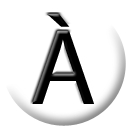
<style>
.page{position:relative;width:128px;height:128px;background:#ffffff}
.page>*{position:absolute;margin:0}
.t1{font:109px "MyriadPro-Regular";color:#000000}
</style>
<div class="page">
<p class="t1" style="left:32px;top:14px;width:62px;height:90px">À</p>
</div>
